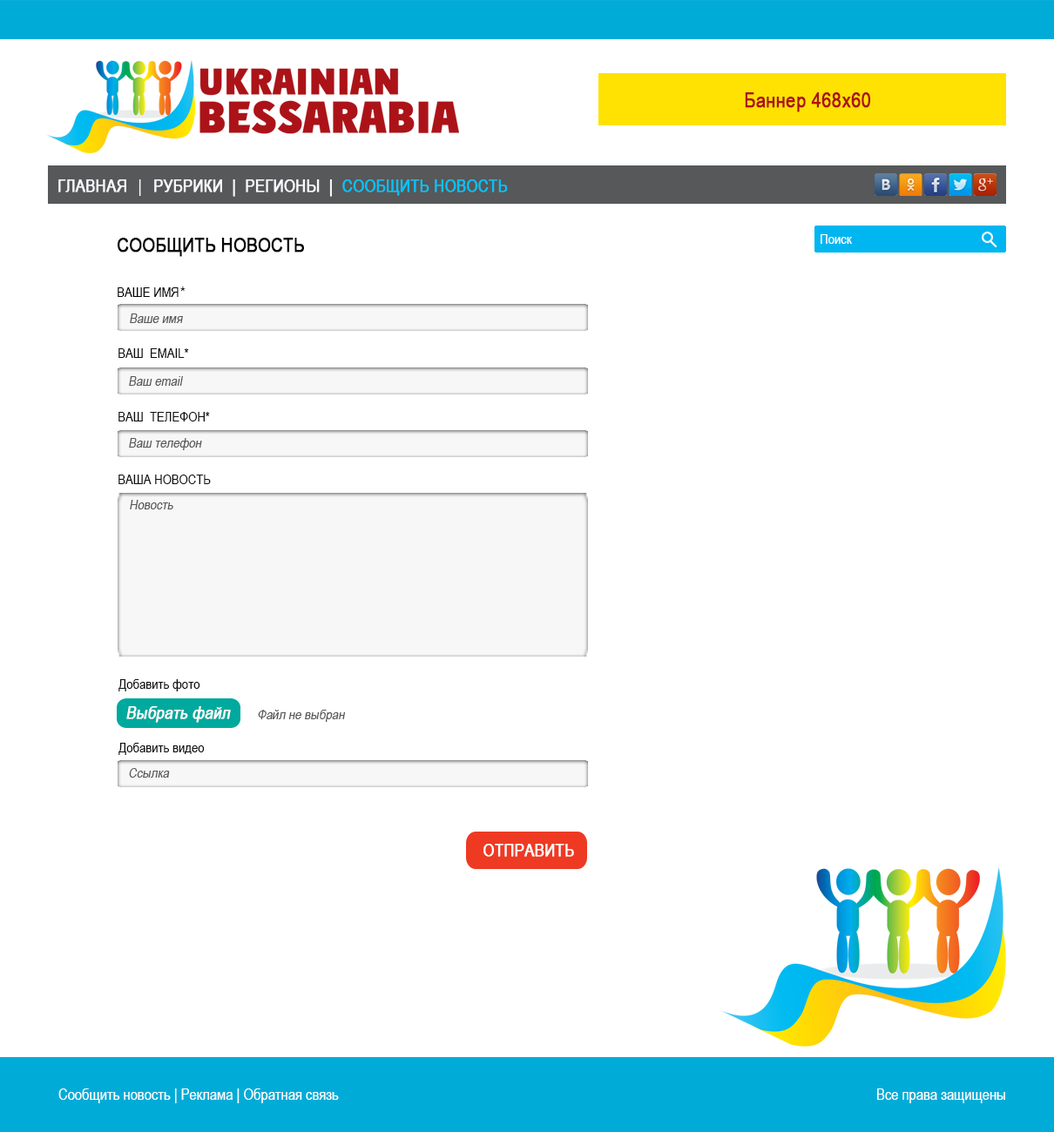
<style>
.page{position:relative;width:1054px;height:1132px;background:#ffffff}
.page>*{position:absolute;margin:0}
.t1{font:17.4px "ArialNarrow";color:#f8fbfd;text-transform:uppercase;font-weight:bold}
.t2{font:15.7px "HeliosCondBold";color:#f8fbfd;text-transform:uppercase}
.t3{font:17.4px "ArialNarrow";color:#f8fbfd;text-transform:uppercase}
.t4{font:17.4px "ArialNarrow";color:#03c3fa;text-transform:uppercase;font-weight:bold}
.t5{font:19.7px "ArialNarrow";color:#040404;text-transform:uppercase;font-weight:bold}
.t6{font:13.9px "ArialNarrow";color:#ffffff}
.t7{font:13.9px "ArialNarrow";color:#040404}
.t8{font:13.9px "HeliosCond";color:#040404}
.t9{font:13.9px "ArialNarrow";color:#565859;font-style:italic}
.t10{font:13.9px "ArialNarrow";color:#0e0e0e}
.t11{font:13.9px "ArialNarrow";color:#0e0e0e;text-transform:uppercase}
.t12{font:17.4px "ArialNarrow";color:#fffefe;font-weight:bold;font-style:italic}
.t13{font:13.9px "ArialNarrow";color:#565859;text-transform:uppercase;font-style:italic}
.t14{font:17.4px "ArialNarrow";color:#fffefe;font-weight:bold}
.t15{font:15.7px "ArialNarrow";color:#ffffff}
</style>
<div class="page">
<p class="t1" style="left:58px;top:179px;width:68px;height:13px">Главная</p>
<p class="t1" style="left:138px;top:179px;width:370px;height:18px"><span class="t2">                      </span><span class="t3">|   </span>рубрики  |  регионы  |  <span class="t4">сообщить новость</span></p>
<p class="t5" style="left:118px;top:238px;width:186px;height:19px">СООБЩИТЬ НОВОСТЬ</p>
<p class="t6" style="left:820px;top:234px;width:32px;height:10px">Поиск</p>
<p class="t7" style="left:118px;top:286px;width:67px;height:11px">ВАШЕ ИМЯ<span class="t8">*</span></p>
<p class="t9" style="left:130px;top:313px;width:53px;height:10px">Ваше имя</p>
<p class="t10" style="left:118px;top:348px;width:71px;height:10px">ВАШ  EMAIL*</p>
<p class="t9" style="left:129px;top:376px;width:54px;height:10px">Ваш email</p>
<p class="t10" style="left:118px;top:412px;width:92px;height:9px">ВАШ  ТЕЛЕФОН*</p>
<p class="t9" style="left:129px;top:438px;width:73px;height:12px">Ваш телефон</p>
<p class="t11" style="left:118px;top:475px;width:93px;height:9px">Ваша новость</p>
<p class="t9" style="left:130px;top:500px;width:43px;height:9px">Новость</p>
<p class="t10" style="left:118px;top:679px;width:82px;height:12px"><span class="t11">Д</span>обавить фото</p>
<p class="t12" style="left:126px;top:706px;width:105px;height:17px">Выбрать файл</p>
<p class="t9" style="left:258px;top:710px;width:88px;height:12px"><span class="t13">Ф</span>айл не выбран</p>
<p class="t10" style="left:118px;top:743px;width:87px;height:12px"><span class="t11">Д</span>обавить видео</p>
<p class="t9" style="left:129px;top:768px;width:41px;height:10px">Ссылка</p>
<p class="t14" style="left:483px;top:844px;width:91px;height:13px">ОТПРАВИТЬ</p>
<p class="t15" style="left:58px;top:1088px;width:281px;height:15px">Сообщить новость | Реклама | Обратная связь</p>
<p class="t15" style="left:877px;top:1088px;width:128px;height:15px">Все права защищены</p>
</div>
